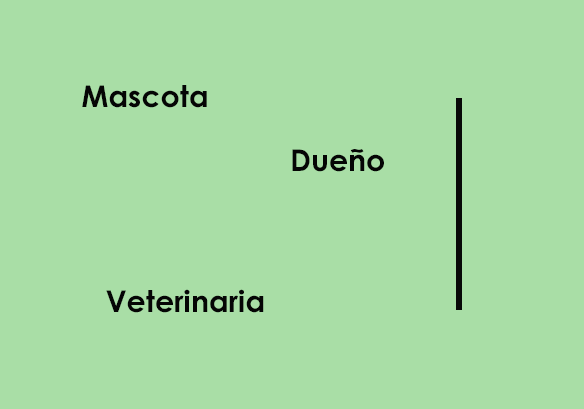
<style>
.page{position:relative;width:584px;height:409px;background:#a9dea6}
.page>*{position:absolute;margin:0}
.t1{font:30px "CenturyGothic-Bold";color:#050505}
</style>
<div class="page">
<p class="t1" style="left:82px;top:85px;width:125px;height:23px">Mascota</p>
<p class="t1" style="left:292px;top:149px;width:92px;height:23px">Dueño</p>
<p class="t1" style="left:106px;top:289px;width:158px;height:24px">Veterinaria</p>
</div>
